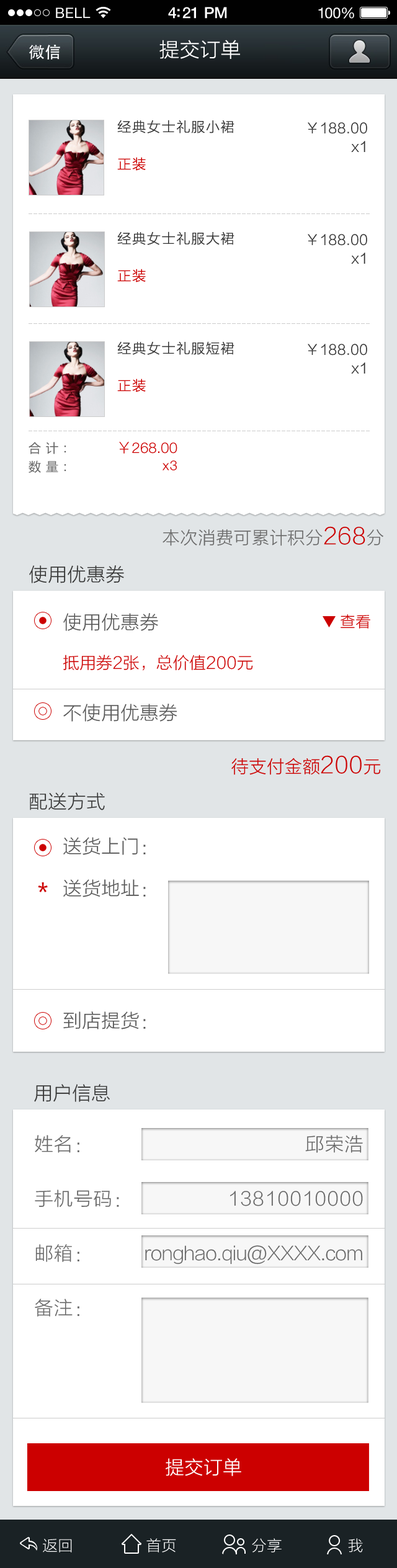
<style>
.page{position:relative;width:397px;height:1568px;background:#ffffff}
.page>*{position:absolute;margin:0}
.t1{font:14.3px "HelveticaNeue";letter-spacing:0.02em;color:#ffffff}
.t2{font:15.5px "HelveticaNeue-Medium";letter-spacing:-0.02em;color:#ffffff}
.t3{font:14.9px "HelveticaNeue";letter-spacing:-0.02em;color:#ffffff}
.t4{font:19.9px "STHeitiSC-Medium";color:#ffffff}
.t5{font:13.7px/18.6px "STHeitiSC-Medium";letter-spacing:0.05em;color:#333333}
.t6{font:13.7px/18.6px "STHeitiSC-Medium";letter-spacing:0.05em;color:#cc0000}
.t7{font:13.7px/18.6px "STHeitiSC-Medium";color:#333333}
.t8{font:11.2px "MicrosoftYaHei";color:#cccccc}
.t9{font:12.4px/18.6px "MicrosoftYaHei";letter-spacing:0.05em;color:#666666}
.t10{font:14.9px/18.6px "HelveticaNeueLTPro-Lt";color:#cc0000}
.t11{font:14.9px/18.6px "STHeitiSC-Medium";color:#cc0000}
.t12{font:13.7px/18.6px "HelveticaNeueLTStd-Lt";letter-spacing:0.05em;color:#cc0000}
.t13{font:17.4px/24.8px "STHeitiSC-Medium";color:#666666}
.t14{font:22.3px/24.8px "STHeitiSC-Medium";color:#cc0000}
.t15{font:18.6px "STHeitiSC-Medium";color:#333333}
.t16{font:16.1px/18.6px "STHeitiSC-Medium";color:#cc0000}
.t17{font:18.6px/21.1px "STHeitiSC-Medium";color:#565656}
.t18{font:18.6px/26.1px "STHeitiSC-Medium";color:#565656}
.t19{font:14.9px "STHeitiSC-Medium";color:#cc0000}
.t20{font:17.4px/24.8px "STHeitiSC-Medium";color:#cc0000}
.t21{font:24.8px "MicrosoftYaHei";color:#cc0000}
.t22{font:18.6px "STHeitiSC-Medium";color:#565656}
.t23{font:18.6px/27.3px "STHeitiSC-Medium";letter-spacing:0.025em;color:#666666}
.t24{font:18.6px/27.3px "STHeitiSC-Medium";letter-spacing:-0.05em;color:#666666}
.t25{font:18.6px "STHeitiSC-Medium";color:#ffffff}
.t26{font:14.9px "STHeitiSC-Medium";color:#ffffff}
</style>
<div class="page">
<p class="t1" style="left:56px;top:7px;width:35px;height:11px">BELL</p>
<p class="t2" style="left:168px;top:7px;width:59px;height:12px">4:21 PM</p>
<p class="t3" style="left:318px;top:7px;width:36px;height:12px">100%</p>
<p class="t4" style="left:159px;top:40px;width:81px;height:19px">提交订单</p>
<p class="t5" style="left:117px;top:120px;width:118px;height:51px">经典女士礼服小裙<br><br><span class="t6">正装</span></p>
<p class="t7" style="left:308px;top:122px;width:59px;height:30px;text-align:right">￥188.00<br>x1</p>
<p class="t8" style="left:29px;top:213px;width:341px;height:1px">---------------------------------------------------------------------</p>
<p class="t5" style="left:117px;top:231px;width:118px;height:51px">经典女士礼服大裙<br><br><span class="t6">正装</span></p>
<p class="t7" style="left:308px;top:234px;width:59px;height:30px;text-align:right">￥188.00<br>x1</p>
<p class="t8" style="left:29px;top:323px;width:341px;height:1px">---------------------------------------------------------------------</p>
<p class="t5" style="left:117px;top:341px;width:118px;height:51px">经典女士礼服短裙<br><br><span class="t6">正装</span></p>
<p class="t7" style="left:308px;top:344px;width:59px;height:30px;text-align:right">￥188.00<br>x1</p>
<p class="t8" style="left:29px;top:431px;width:341px;height:0px">---------------------------------------------------------------------</p>
<p class="t9" style="left:29px;top:442px;width:37px;height:31px">合 计：<br>数 量：</p>
<p class="t10" style="left:119px;top:442px;width:58px;height:28px;text-align:right"><span class="t11">￥</span>268.00<br><span class="t12">x3</span></p>
<p class="t13" style="left:163px;top:526px;width:220px;height:20px">本次消费可累计积分<span class="t14">268</span>分<br>快速加入会员，获取本次积分。</p>
<p class="t15" style="left:29px;top:565px;width:95px;height:18px">使用优惠券</p>
<p class="t16" style="left:63px;top:613px;width:190px;height:109px;text-align:justify"><span class="t17">使用优惠券<br><br></span>抵用券2张，总价值200元<br><br><span class="t18">不使用优惠券</span></p>
<p class="t19" style="left:341px;top:614px;width:29px;height:15px">查看</p>
<p class="t20" style="left:231px;top:755px;width:150px;height:20px">待支付金额<span class="t14">200</span>元<br>快速加入会员，获取本次积分。</p>
<p class="t15" style="left:29px;top:792px;width:76px;height:18px">配送方式</p>
<p class="t17" style="left:63px;top:837px;width:83px;height:60px;text-align:justify">送货上门：                                  <br><br>送货地址：</p>
<p class="t21" style="left:38px;top:882px;width:10px;height:10px">*</p>
<p class="t22" style="left:63px;top:1011px;width:83px;height:18px">到店提货：</p>
<p class="t15" style="left:34px;top:1084px;width:76px;height:18px">用户信息</p>
<p class="t23" style="left:35px;top:1135px;width:84px;height:182px">姓名：<br><br>手机号码：<br><br>邮箱：<br><br>备注：</p>
<p class="t24" style="left:145px;top:1135px;width:218px;height:130px;text-align:right"><span class="t23">邱荣浩<br><br>13810010000<br><br></span>ronghao.qiu@XXXX.com</p>
<p class="t25" style="left:166px;top:1458px;width:75px;height:18px">提交订单</p>
<p class="t26" style="left:43px;top:1539px;width:29px;height:13px">返回</p>
<p class="t26" style="left:146px;top:1538px;width:30px;height:14px">首页</p>
<p class="t26" style="left:252px;top:1538px;width:30px;height:14px">分享</p>
<p class="t26" style="left:348px;top:1538px;width:15px;height:14px">我</p>
</div>
